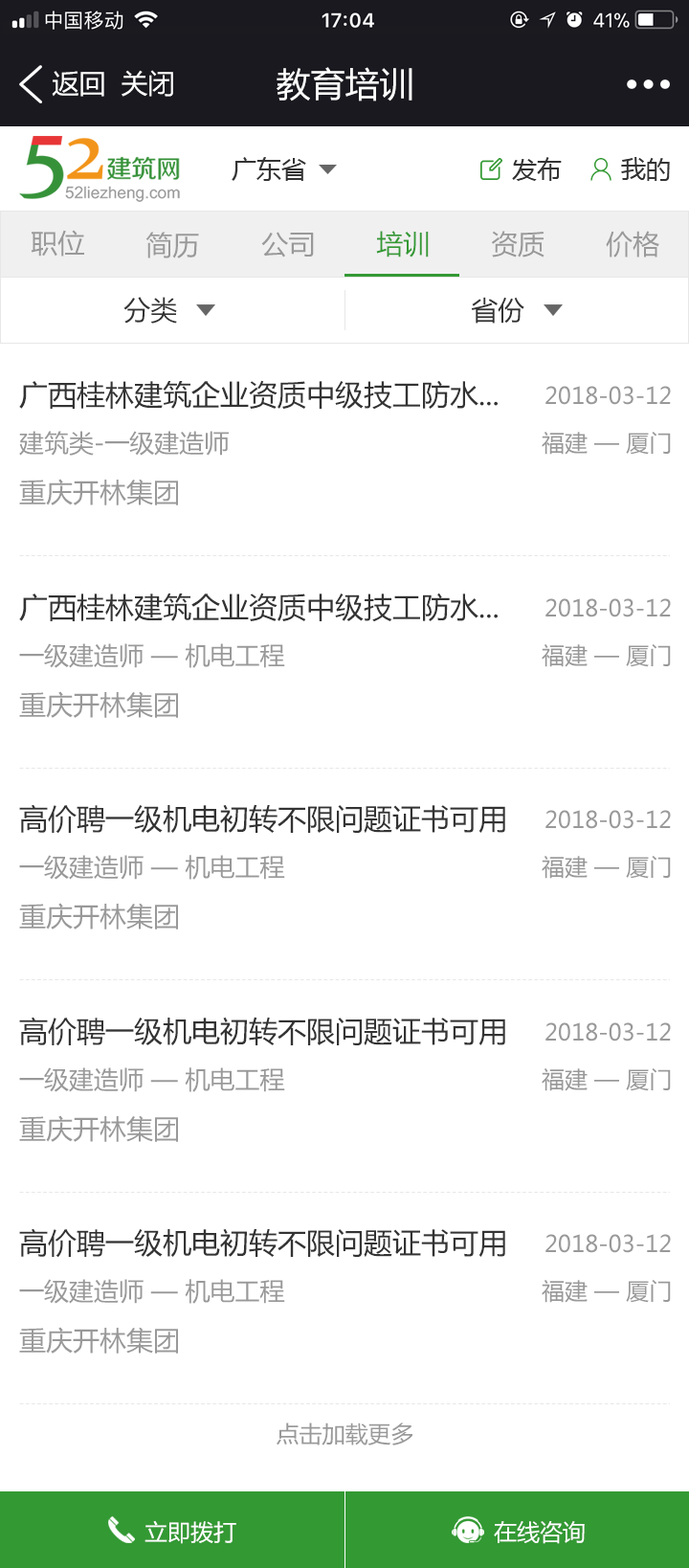
<style>
.page{position:relative;width:689px;height:1568px;background:#ffffff}
.page>*{position:absolute;margin:0}
.t1{font:26.8px "MicrosoftYaHei";color:#ffffff}
.t2{font:34.5px "MicrosoftYaHei";color:#ffffff}
.t3{font:24.9px "MicrosoftYaHei";color:#333333}
.t4{font:26.8px "MicrosoftYaHei";color:#999999}
.t5{font:26.8px "MicrosoftYaHei";color:#339933}
.t6{font:26.8px "MicrosoftYaHei";color:#333333}
.t7{font:28.7px "MicrosoftYaHei";color:#333333}
.t8{font:23px "MicrosoftYaHei";color:#999999}
.t9{font:24.9px "MicrosoftYaHei";color:#999999}
.t10{font:23px "MicrosoftYaHei";color:#ffffff}
</style>
<div class="page">
<p class="t1" style="left:52px;top:71px;width:52px;height:26px">返回</p>
<p class="t1" style="left:122px;top:70px;width:51px;height:27px">关闭</p>
<p class="t2" style="left:277px;top:67px;width:136px;height:34px">教育培训</p>
<p class="t3" style="left:232px;top:157px;width:74px;height:24px">广东省</p>
<p class="t3" style="left:512px;top:157px;width:50px;height:24px">发布</p>
<p class="t3" style="left:621px;top:157px;width:49px;height:24px">我的</p>
<p class="t4" style="left:31px;top:230px;width:53px;height:27px">职位</p>
<p class="t4" style="left:146px;top:232px;width:53px;height:26px">简历</p>
<p class="t4" style="left:261px;top:232px;width:53px;height:26px">公司</p>
<p class="t5" style="left:376px;top:231px;width:53px;height:27px">培训</p>
<p class="t4" style="left:491px;top:231px;width:54px;height:27px">资质</p>
<p class="t4" style="left:606px;top:231px;width:54px;height:27px">价格</p>
<p class="t6" style="left:123px;top:297px;width:54px;height:27px">分类</p>
<p class="t6" style="left:471px;top:297px;width:54px;height:27px">省份</p>
<p class="t7" style="left:19px;top:380px;width:479px;height:30px">广西桂林建筑企业资质中级技工防水...</p>
<p class="t8" style="left:546px;top:386px;width:125px;height:19px">2018-03-12</p>
<p class="t9" style="left:19px;top:431px;width:210px;height:25px">建筑类-一级建造师</p>
<p class="t8" style="left:542px;top:432px;width:129px;height:23px">福建 — 厦门</p>
<p class="t4" style="left:19px;top:479px;width:159px;height:26px">重庆开林集团</p>
<p class="t7" style="left:19px;top:593px;width:479px;height:29px">广西桂林建筑企业资质中级技工防水...</p>
<p class="t8" style="left:546px;top:598px;width:125px;height:19px">2018-03-12</p>
<p class="t9" style="left:19px;top:643px;width:266px;height:25px">一级建造师 — 机电工程</p>
<p class="t8" style="left:542px;top:644px;width:129px;height:23px">福建 — 厦门</p>
<p class="t4" style="left:19px;top:691px;width:159px;height:27px">重庆开林集团</p>
<p class="t7" style="left:19px;top:804px;width:486px;height:30px">高价聘一级机电初转不限问题证书可用</p>
<p class="t8" style="left:546px;top:810px;width:125px;height:19px">2018-03-12</p>
<p class="t9" style="left:19px;top:855px;width:266px;height:25px">一级建造师 — 机电工程</p>
<p class="t8" style="left:542px;top:856px;width:129px;height:23px">福建 — 厦门</p>
<p class="t4" style="left:19px;top:903px;width:159px;height:27px">重庆开林集团</p>
<p class="t7" style="left:19px;top:1017px;width:486px;height:29px">高价聘一级机电初转不限问题证书可用</p>
<p class="t8" style="left:546px;top:1022px;width:125px;height:20px">2018-03-12</p>
<p class="t9" style="left:19px;top:1067px;width:266px;height:25px">一级建造师 — 机电工程</p>
<p class="t8" style="left:542px;top:1068px;width:129px;height:23px">福建 — 厦门</p>
<p class="t4" style="left:19px;top:1115px;width:159px;height:27px">重庆开林集团</p>
<p class="t7" style="left:19px;top:1228px;width:486px;height:30px">高价聘一级机电初转不限问题证书可用</p>
<p class="t8" style="left:546px;top:1234px;width:125px;height:19px">2018-03-12</p>
<p class="t9" style="left:19px;top:1279px;width:266px;height:25px">一级建造师 — 机电工程</p>
<p class="t8" style="left:542px;top:1280px;width:129px;height:23px">福建 — 厦门</p>
<p class="t4" style="left:19px;top:1327px;width:159px;height:27px">重庆开林集团</p>
<p class="t8" style="left:277px;top:1422px;width:136px;height:23px">点击加载更多</p>
<p class="t10" style="left:145px;top:1520px;width:91px;height:24px">立即拨打</p>
<p class="t10" style="left:494px;top:1521px;width:91px;height:23px">在线咨询</p>
</div>
